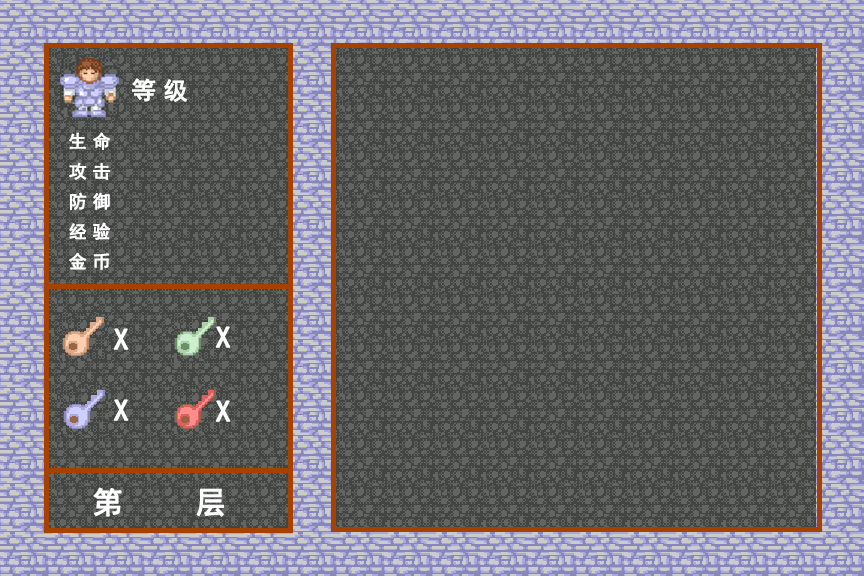
<style>
.page{position:relative;width:864px;height:576px;background:#424542}
.page>*{position:absolute;margin:0}
.t1{font:24px "SimHei";letter-spacing:0.3em;color:#ffffff;font-weight:bold}
.t2{font:18px "SimHei";letter-spacing:0.3em;color:#ffffff;font-weight:bold}
.t3{font:30px "SimHei";letter-spacing:0.3em;color:#ffffff;font-weight:bold}
</style>
<div class="page">
<p class="t1" style="left:132px;top:78px;width:55px;height:24px">等级</p>
<p class="t2" style="left:69px;top:132px;width:42px;height:18px">生命</p>
<p class="t2" style="left:69px;top:162px;width:42px;height:18px">攻击</p>
<p class="t2" style="left:70px;top:192px;width:40px;height:18px">防御</p>
<p class="t2" style="left:69px;top:222px;width:42px;height:18px">经验</p>
<p class="t2" style="left:69px;top:252px;width:41px;height:18px">金币</p>
<p class="t3" style="left:113px;top:328px;width:16px;height:22px">X</p>
<p class="t3" style="left:215px;top:326px;width:16px;height:22px">X</p>
<p class="t3" style="left:113px;top:399px;width:16px;height:22px">X</p>
<p class="t3" style="left:215px;top:400px;width:16px;height:22px">X</p>
<p class="t3" style="left:93px;top:487px;width:29px;height:30px">第</p>
<p class="t3" style="left:196px;top:488px;width:28px;height:29px">层</p>
</div>
